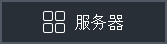
<style>
.page{position:relative;width:167px;height:44px;background:#292f37}
.page>*{position:absolute;margin:0}
.t1{font:16px "NSimSun";letter-spacing:0.05em;color:#ffffff}
</style>
<div class="page">
<p class="t1" style="left:75px;top:14px;width:48px;height:16px">服务器</p>
</div>
